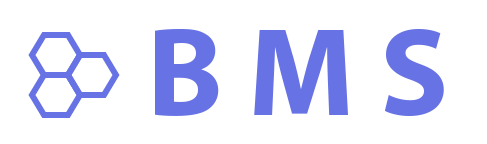
<style>
.page{position:relative;width:487px;height:144px;background:#ffffff}
.page>*{position:absolute;margin:0}
.t1{font:126px "MyriadPro-Bold";color:#6772e5}
</style>
<div class="page">
<p class="t1" style="left:155px;top:29px;width:289px;height:87px">B M S</p>
</div>
